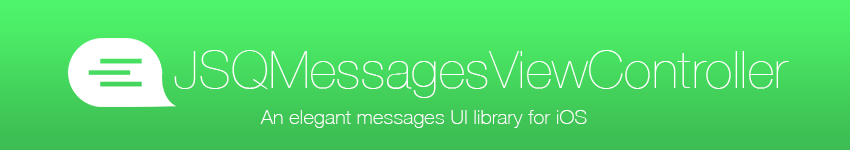
<style>
.page{position:relative;width:850px;height:150px}
.page>*{position:absolute;margin:0}
.t1{font:52px "HelveticaNeue-UltraLight";letter-spacing:0.01em;color:#ffffff}
.t2{font:20px "HelveticaNeue-Thin";letter-spacing:0.01em;color:#ffffff}
</style>
<div class="page">
<p class="t1" style="left:174px;top:50px;width:615px;height:48px">JSQMessagesViewController</p>
<p class="t2" style="left:260px;top:110px;width:327px;height:18px">An elegant messages UI library for iOS</p>
</div>
